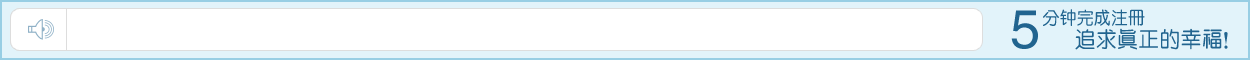
<style>
.page{position:relative;width:1250px;height:60px;background:#ffffff}
.page>*{position:absolute;margin:0}
.t1{font:54.6px "CTZhongYuanSJ";letter-spacing:-0.05em;color:#21648f;text-transform:uppercase}
.t2{font:18px "CTZhongYuanSJ";letter-spacing:-0.05em;color:#21648f;text-transform:uppercase}
.t3{font:22.3px "CTZhongYuanSJ";letter-spacing:-0.05em;color:#21648f;text-transform:uppercase}
</style>
<div class="page">
<p class="t1" style="left:1011px;top:10px;width:27px;height:39px">5</p>
<p class="t2" style="left:1043px;top:9px;width:102px;height:17px">分钟完成注册</p>
<p class="t3" style="left:1075px;top:28px;width:153px;height:22px">追求真正的幸福！</p>
</div>
